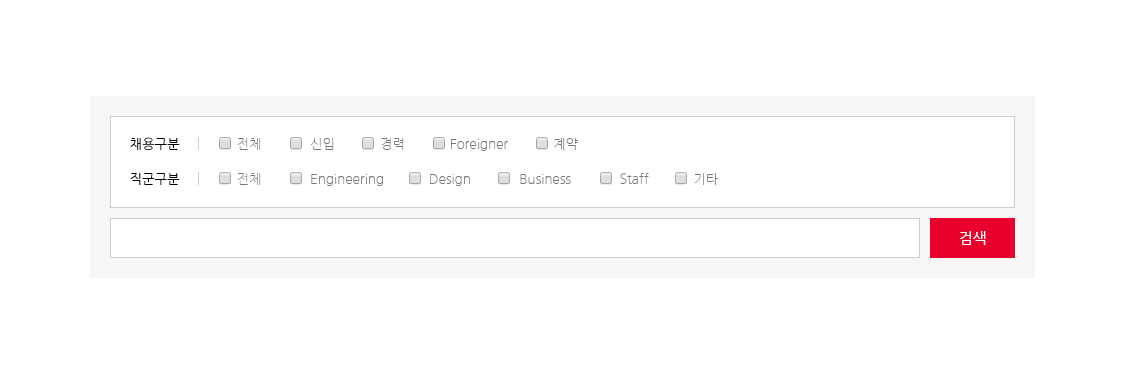
<style>
.page{position:relative;width:1134px;height:392px;background:#ffffff}
.page>*{position:absolute;margin:0}
.t1{font:13.3px "NanumGothic";color:#000000}
.t2{font:13.3px "NanumGothicLight";color:#777777}
.t3{font:14.7px "NanumGothic";color:#ffffff}
</style>
<div class="page">
<p class="t1" style="left:130px;top:137px;width:50px;height:14px">채용구분</p>
<p class="t2" style="left:237px;top:138px;width:341px;height:13px">전체             신입            경력            Foreigner            계약</p>
<p class="t1" style="left:130px;top:173px;width:50px;height:12px">직군구분</p>
<p class="t2" style="left:237px;top:173px;width:482px;height:13px">전체             Engineering            Design             Business             Staff            기타</p>
<p class="t3" style="left:960px;top:231px;width:26px;height:14px">검색</p>
</div>
